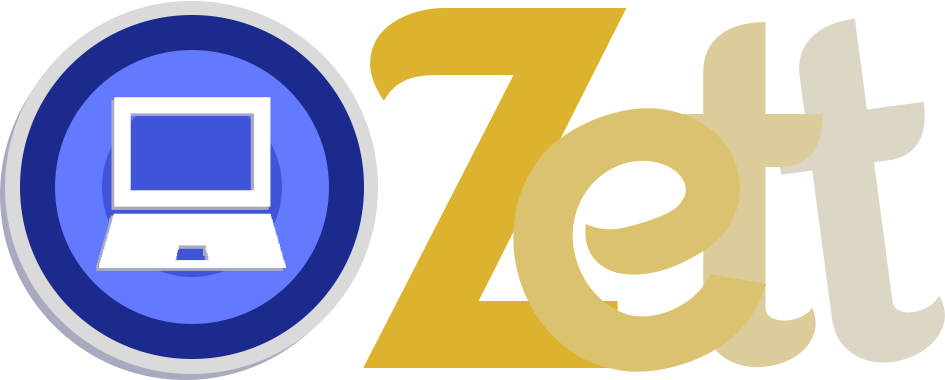
<style>
.page{position:relative;width:945px;height:380px;background:#ffffff}
.page>*{position:absolute;margin:0}
.t1{font:515.3px "Fonarto";color:#dbb32f}
.t2{font:493.5px "Fonarto";color:#dbcc9a}
.t3{font:493.5px "Fonarto";color:#dbd6c5}
.t4{font:479.8px "Fonarto";color:#dbc26e}
</style>
<div class="page">
<p class="t1" style="left:363px;top:8px;width:264px;height:360px">Z</p>
<p class="t2" style="left:671px;top:22px;width:152px;height:346px">t</p>
<p class="t3" style="left:773px;top:18px;width:172px;height:345px;rotate:-8deg">t</p>
<p class="t4" style="left:513px;top:108px;width:254px;height:264px;rotate:-16deg">e</p>
</div>
